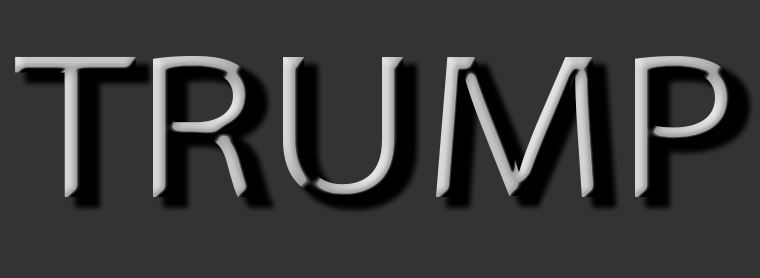
<style>
.page{position:relative;width:760px;height:278px;background:#333333}
.page>*{position:absolute;margin:0}
.t1{font:208.1px "MyriadPro-Regular";scale:1.16 1}
</style>
<div class="page">
<p class="t1" style="left:15px;top:55px;width:721px;height:144px">TRUMP</p>
</div>
